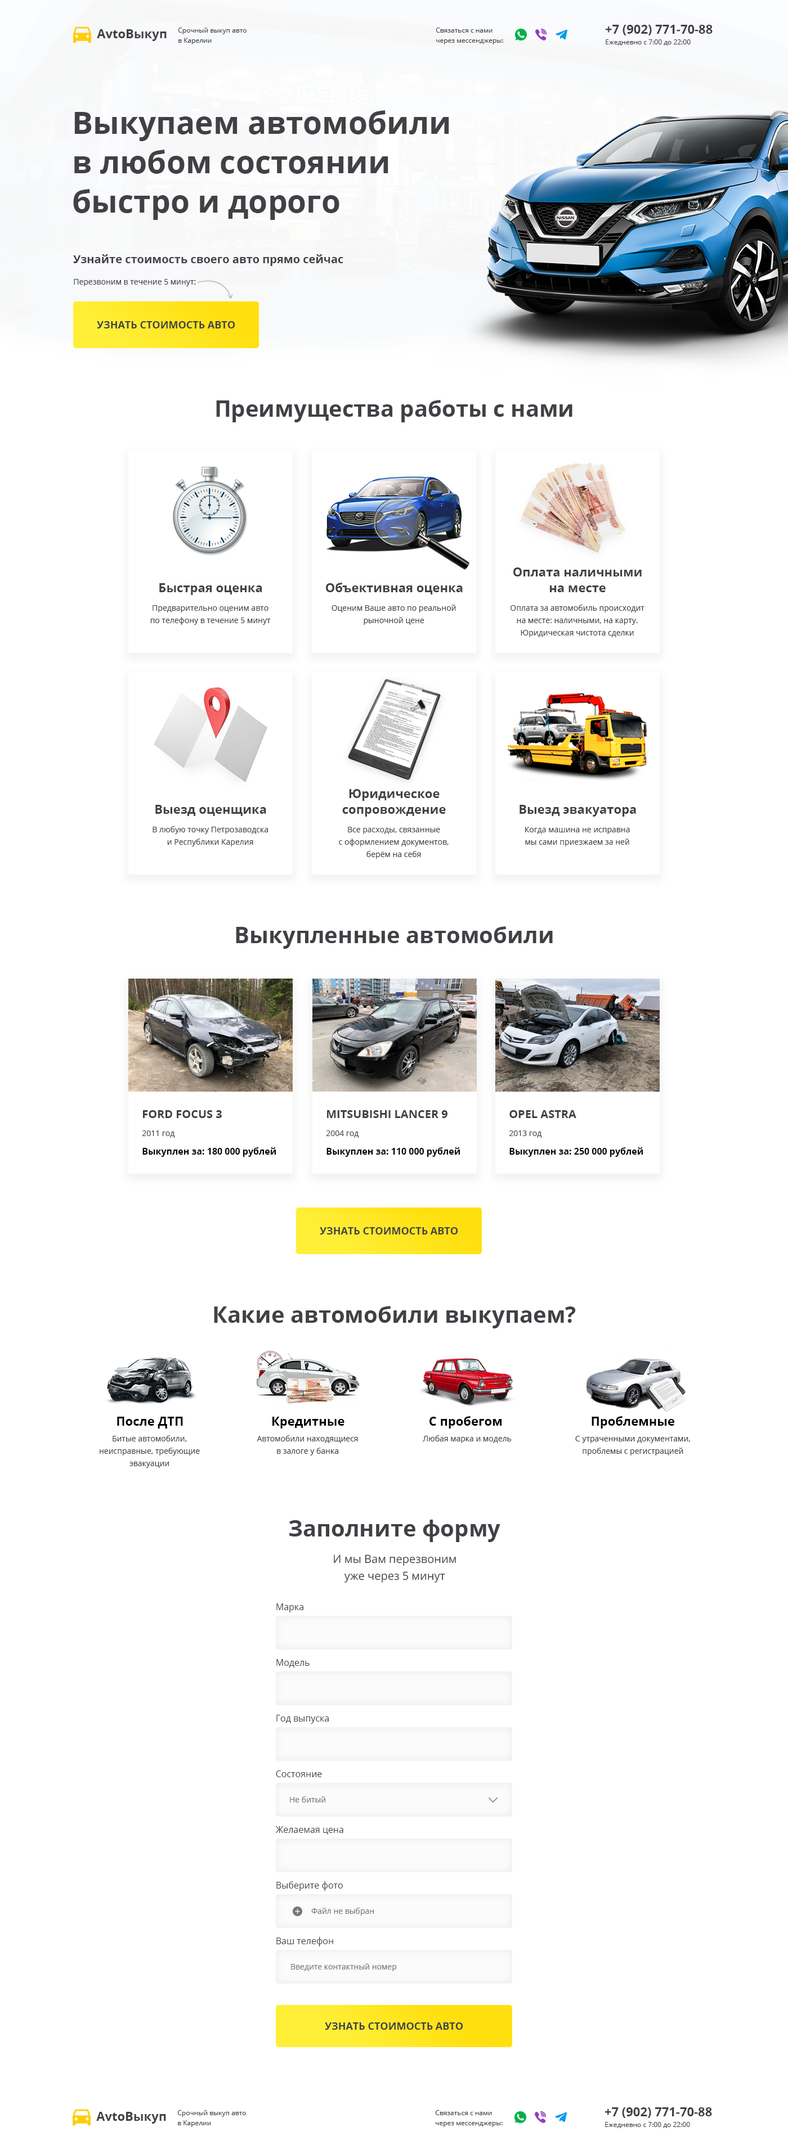
<style>
.page{position:relative;width:788px;height:2154px;background:#ffffff}
.page>*{position:absolute;margin:0}
.t1{font:12.4px "OpenSans-Bold";color:#424045}
.t2{font:6.8px/10.1px "OpenSans";color:#424045}
.t3{font:6.8px "OpenSans";color:#424045}
.t4{font:30.9px/39.4px "OpenSans-Bold";color:#424045}
.t5{font:11.2px "OpenSans-Bold";color:#424045}
.t6{font:7.9px "OpenSans";color:#424045}
.t7{font:10.1px "OpenSans-Bold";color:#424045;text-transform:uppercase}
.t8{font:22.5px "OpenSans-Bold";color:#424045}
.t9{font:12.4px/15.8px "OpenSans-Bold";color:#424045}
.t10{font:7.9px/12.4px "OpenSans";color:#424045}
.t11{font:11.2px "OpenSans-Bold";color:#424045;text-transform:uppercase}
.t12{font:9px "OpenSans-Bold";color:#000000}
.t13{font:12.4px "OpenSans-Bold";color:#000000}
.t14{font:11.2px/16.9px "OpenSans";color:#424045}
.t15{font:9px "OpenSans";color:#424045}
.t16{font:7.9px "OpenSans";color:#777777}
</style>
<div class="page">
<p class="t1" style="left:97px;top:29px;width:69px;height:12px">AvtoВыкуп</p>
<p class="t2" style="left:178px;top:28px;width:68px;height:16px">Срочный выкуп авто <br>в Карелии</p>
<p class="t2" style="left:435px;top:28px;width:68px;height:16px">Связаться с нами через мессенджеры:</p>
<p class="t1" style="left:605px;top:25px;width:107px;height:10px">+7 (902) 771-70-88</p>
<p class="t3" style="left:605px;top:39px;width:85px;height:7px">Ежедневно с 7:00 до 22:00</p>
<p class="t4" style="left:73px;top:110px;width:376px;height:110px">Выкупаем автомобили в любом состоянии быстро и дорого</p>
<p class="t5" style="left:73px;top:254px;width:270px;height:12px">Узнайте стоимость своего авто прямо сейчас</p>
<p class="t6" style="left:74px;top:279px;width:122px;height:7px">Перезвоним в течение 5 минут:</p>
<p class="t7" style="left:97px;top:321px;width:138px;height:7px">Узнать стоимость авто</p>
<p class="t8" style="left:216px;top:400px;width:356px;height:22px">Преимущества работы с нами</p>
<p class="t9" style="left:513px;top:568px;width:128px;height:24px;text-align:center">Оплата наличными<br>на месте</p>
<p class="t1" style="left:159px;top:583px;width:103px;height:12px">Быстрая оценка</p>
<p class="t1" style="left:326px;top:583px;width:136px;height:12px">Объективная оценка</p>
<p class="t10" style="left:150px;top:605px;width:121px;height:20px;text-align:center">Предварительно оценим авто <br>по телефону в течение 5 минут</p>
<p class="t10" style="left:331px;top:605px;width:125px;height:20px;text-align:center">Оценим Ваше авто по реальной рыночной цене</p>
<p class="t10" style="left:510px;top:605px;width:134px;height:32px;text-align:center">Оплата за автомобиль происходит <br>на месте: наличными, на карту.<br>Юридическая чистота сделки</p>
<p class="t9" style="left:342px;top:789px;width:104px;height:28px;text-align:center">Юридическое сопровождение</p>
<p class="t1" style="left:155px;top:805px;width:111px;height:11px">Выезд оценщика</p>
<p class="t1" style="left:519px;top:805px;width:117px;height:12px">Выезд эвакуатора</p>
<p class="t10" style="left:152px;top:826px;width:116px;height:21px;text-align:center">В любую точку Петрозаводска и Республики Карелия</p>
<p class="t10" style="left:339px;top:827px;width:109px;height:32px;text-align:center">Все расходы, связанные <br>с оформлением документов, <br>берём на себя</p>
<p class="t10" style="left:525px;top:827px;width:104px;height:20px;text-align:center">Когда машина не исправна мы сами приезжаем за ней</p>
<p class="t8" style="left:236px;top:926px;width:316px;height:23px">Выкупленные автомобили</p>
<p class="t11" style="left:143px;top:1110px;width:79px;height:8px">Ford Focus 3</p>
<p class="t11" style="left:327px;top:1110px;width:120px;height:8px">mitsubishi lancer 9</p>
<p class="t11" style="left:509px;top:1110px;width:67px;height:8px">opel astra</p>
<p class="t6" style="left:142px;top:1131px;width:33px;height:7px">2011 год</p>
<p class="t6" style="left:326px;top:1131px;width:33px;height:7px">2004 год</p>
<p class="t6" style="left:508px;top:1131px;width:34px;height:7px">2013 год</p>
<p class="t12" style="left:142px;top:1148px;width:134px;height:9px">Выкуплен за: 180 000 рублей</p>
<p class="t12" style="left:326px;top:1148px;width:134px;height:9px">Выкуплен за: 110 000 рублей</p>
<p class="t12" style="left:509px;top:1148px;width:133px;height:9px">Выкуплен за: 250 000 рублей</p>
<p class="t7" style="left:320px;top:1227px;width:138px;height:8px">Узнать стоимость авто</p>
<p class="t8" style="left:214px;top:1306px;width:361px;height:23px">Какие автомобили выкупаем?</p>
<p class="t13" style="left:117px;top:1417px;width:66px;height:12px">После ДТП</p>
<p class="t13" style="left:272px;top:1417px;width:72px;height:12px">Кредитные</p>
<p class="t13" style="left:429px;top:1416px;width:73px;height:13px">С пробегом</p>
<p class="t13" style="left:591px;top:1416px;width:83px;height:13px">Проблемные</p>
<p class="t10" style="left:100px;top:1436px;width:100px;height:32px;text-align:center">Битые автомобили, неисправные, требующие эвакуации</p>
<p class="t10" style="left:256px;top:1436px;width:102px;height:20px;text-align:center">Автомобили находящиеся <br>в залоге у банка</p>
<p class="t6" style="left:422px;top:1436px;width:89px;height:7px">Любая марка и модель</p>
<p class="t10" style="left:575px;top:1436px;width:115px;height:20px;text-align:center">С утраченными документами, проблемы с регистрацией</p>
<p class="t8" style="left:289px;top:1520px;width:211px;height:22px">Заполните форму</p>
<p class="t14" style="left:334px;top:1555px;width:122px;height:28px;text-align:center">И мы Вам перезвоним уже через 5 минут</p>
<p class="t15" style="left:276px;top:1604px;width:27px;height:9px">Марка</p>
<p class="t15" style="left:276px;top:1659px;width:33px;height:9px">Модель</p>
<p class="t15" style="left:276px;top:1715px;width:52px;height:9px">Год выпуска</p>
<p class="t15" style="left:276px;top:1771px;width:46px;height:7px">Состояние</p>
<p class="t16" style="left:290px;top:1797px;width:35px;height:6px">Не битый</p>
<p class="t15" style="left:275px;top:1826px;width:68px;height:9px">Желаемая цена</p>
<p class="t15" style="left:276px;top:1882px;width:67px;height:9px">Выберите фото</p>
<p class="t16" style="left:311px;top:1908px;width:63px;height:8px">Файл не выбран</p>
<p class="t15" style="left:276px;top:1937px;width:57px;height:10px">Ваш телефон</p>
<p class="t16" style="left:291px;top:1964px;width:106px;height:8px">Введите контактный номер</p>
<p class="t7" style="left:325px;top:2023px;width:138px;height:7px">Узнать стоимость авто</p>
<p class="t1" style="left:96px;top:2112px;width:70px;height:12px">AvtoВыкуп</p>
<p class="t2" style="left:177px;top:2110px;width:69px;height:17px">Срочный выкуп авто <br>в Карелии</p>
<p class="t2" style="left:435px;top:2110px;width:67px;height:17px">Связаться с нами через мессенджеры:</p>
<p class="t1" style="left:605px;top:2108px;width:107px;height:10px">+7 (902) 771-70-88</p>
<p class="t3" style="left:605px;top:2122px;width:85px;height:6px">Ежедневно с 7:00 до 22:00</p>
</div>
